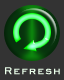
<style>
.page{position:relative;width:64px;height:80px;background:#333333}
.page>*{position:absolute;margin:0}
.t1{font:13px "ChiselNormal";letter-spacing:0.1em;color:#eaffea;font-weight:bold}
</style>
<div class="page">
<p class="t1" style="left:5px;top:67px;width:55px;height:8px">Refresh</p>
</div>
